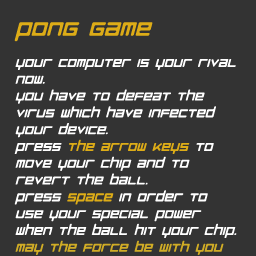
<style>
.page{position:relative;width:256px;height:256px;background:#333333}
.page>*{position:absolute;margin:0}
.t1{font:14px "RazerOblique";color:#ffffff}
.t2{font:24px "RazerOblique";color:#ddac17}
.t3{font:14px "RazerOblique";color:#ddac17}
.t4{font:14px "RazerOblique";color:#d0ac25}
</style>
<div class="page">
<p class="t1" style="left:14px;top:22px;width:223px;height:233px"><span class="t2">PONG GAME<br><br></span>Your computer is your rival now.<br>You have to defeat the virus which have infected your device.<br>Press <span class="t3">the arrow keys </span>to move your chip and to  revert the ball.<br>Press <span class="t3">space</span> in order to use your special power when the ball hit your chip.<br><span class="t4">May the force be with you</span></p>
</div>
